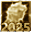
<style>
.page{position:relative;width:32px;height:32px}
.page>*{position:absolute;margin:0}
.t1{font:12px "MicrosoftYaHeiUI-Bold"}
</style>
<div class="page">
<p class="t1" style="left:1px;top:22px;width:29px;height:11px">2025</p>
</div>
